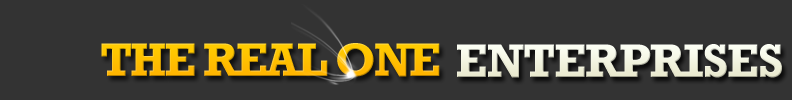
<style>
.page{position:relative;width:792px;height:100px;background:#333333}
.page>*{position:absolute;margin:0}
.t1{font:48px "Rockwell-Bold";letter-spacing:-0.05em;color:#ffc000;text-transform:uppercase}
.t2{font:48px "Rockwell-Bold";letter-spacing:-0.025em;color:#f1f3df;text-transform:uppercase}
</style>
<div class="page">
<p class="t1" style="left:101px;top:43px;width:339px;height:34px">The real one</p>
<p class="t2" style="left:457px;top:44px;width:325px;height:34px">Enterprises</p>
</div>
